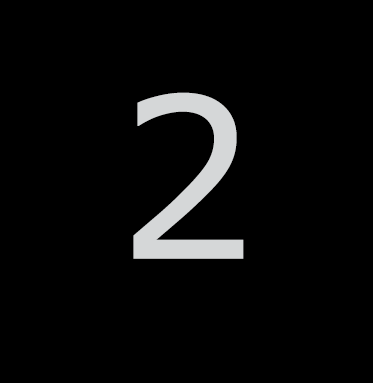
<style>
.page{position:relative;width:373px;height:383px;background:#000000}
.page>*{position:absolute;margin:0}
.t1{font:223.1px "Verdana";color:#d5d7d8}
</style>
<div class="page">
<p class="t1" style="left:133px;top:92px;width:111px;height:167px">2</p>
</div>
